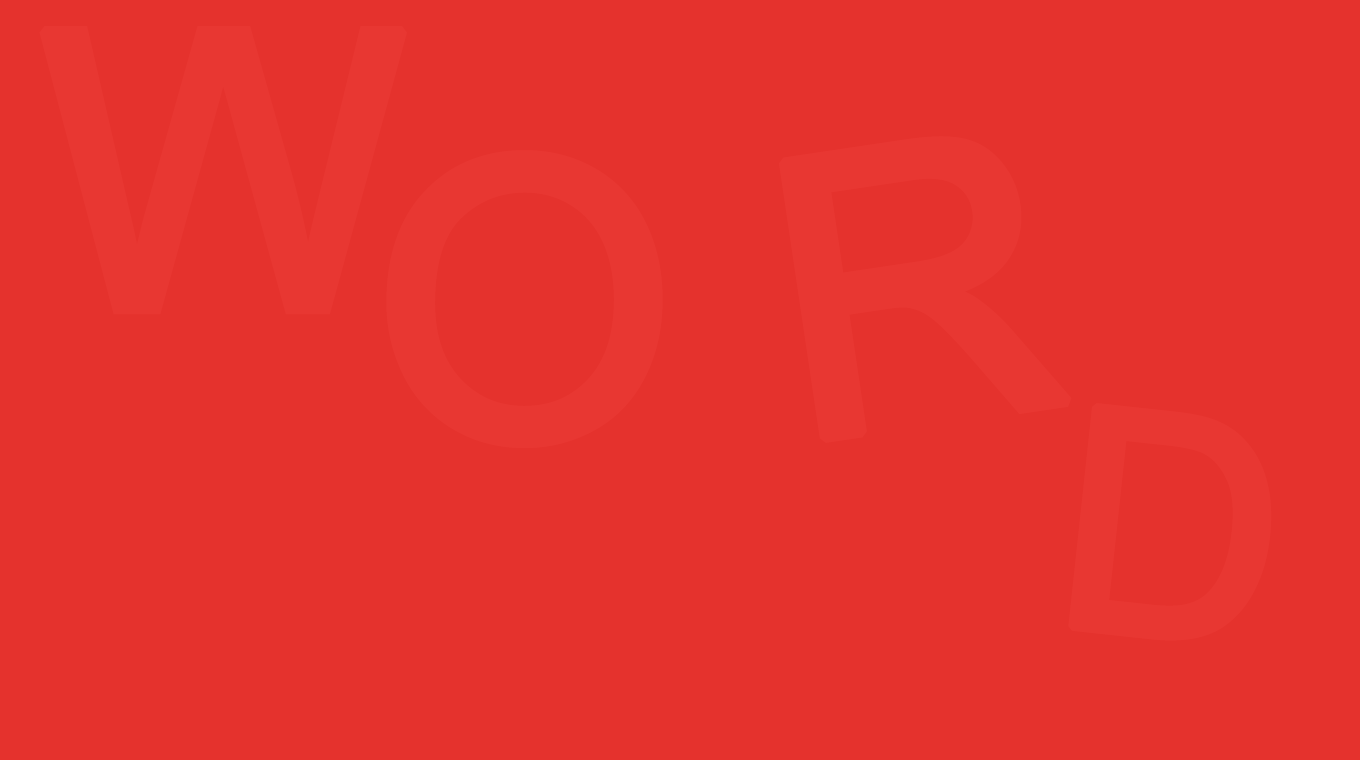
<style>
.page{position:relative;width:1360px;height:760px;background:#e5322d}
.page>*{position:absolute;margin:0}
.t1{font:388px "ArialMT";color:#ef403b;font-weight:bold}
.t2{font:308px "ArialMT";color:#ef403b;font-weight:bold}
</style>
<div class="page">
<p class="t1" style="left:39px;top:26px;width:368px;height:289px;opacity:0.34">W</p>
<p class="t1" style="left:779px;top:136px;width:293px;height:307px;rotate:-8deg;opacity:0.34">R</p>
<p class="t1" style="left:386px;top:150px;width:277px;height:298px;opacity:0.34">O</p>
<p class="t2" style="left:1068px;top:403px;width:204px;height:238px;rotate:6deg;opacity:0.34">D</p>
</div>
